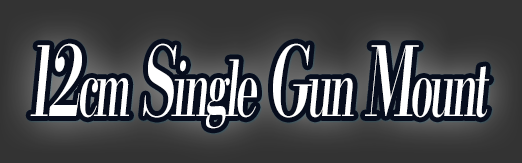
<style>
.page{position:relative;width:522px;height:163px}
.page>*{position:absolute;margin:0}
.t1{font:76.8px "KochoStd-Heavy";letter-spacing:-0.08em;color:#ffffff;font-style:italic;scale:0.54 1}
.t2{font:96px "KochoStd-Heavy";letter-spacing:-0.08em;color:#ffffff;font-style:italic;scale:0.54 1}
</style>
<div class="page">
<p class="t1" style="left:30px;top:43px;width:460px;height:86px"><span class="t2">12</span>cm<span class="t2"> S</span>ingle<span class="t2"> G</span>un<span class="t2"> M</span>ount</p>
</div>
